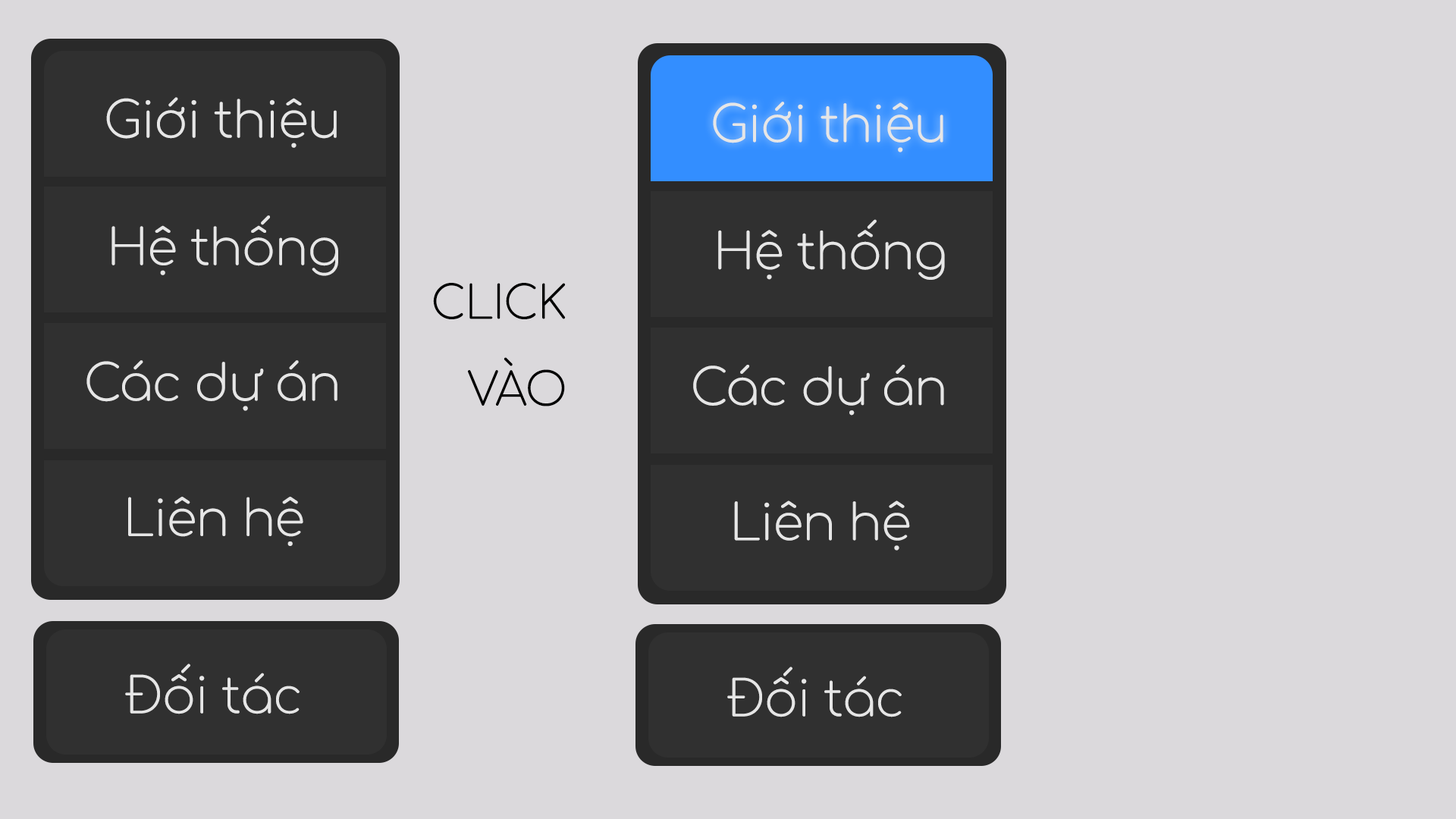
<style>
.page{position:relative;width:1456px;height:819px;background:#dbd9dc}
.page>*{position:absolute;margin:0}
.t1{font:49.9px "#9Slide03ComfortaaLight";letter-spacing:-0.02em;color:#e6e6e6}
.t2{font:45.6px/86.9px "#9Slide03ComfortaaLight";letter-spacing:-0.02em;color:#000000}
.t3{font:49.6px "#9Slide03ComfortaaLight";letter-spacing:-0.02em;color:#e6e6e6}
</style>
<div class="page">
<p class="t1" style="left:106px;top:97px;width:231px;height:51px">Giới thiệu</p>
<p class="t1" style="left:713px;top:102px;width:230px;height:50px">Giới thiệu</p>
<p class="t1" style="left:111px;top:215px;width:227px;height:61px">Hệ thống</p>
<p class="t1" style="left:718px;top:219px;width:227px;height:61px">Hệ thống</p>
<p class="t2" style="left:433px;top:283px;width:133px;height:123px;text-align:right">CLICK<br>VÀO</p>
<p class="t1" style="left:86px;top:360px;width:251px;height:51px">Các dự án</p>
<p class="t1" style="left:693px;top:365px;width:251px;height:51px">Các dự án</p>
<p class="t1" style="left:128px;top:497px;width:175px;height:49px">Liên hệ</p>
<p class="t1" style="left:734px;top:500px;width:176px;height:51px">Liên hệ</p>
<p class="t3" style="left:125px;top:664px;width:175px;height:50px">Đối tác</p>
<p class="t3" style="left:727px;top:667px;width:175px;height:50px">Đối tác</p>
</div>
